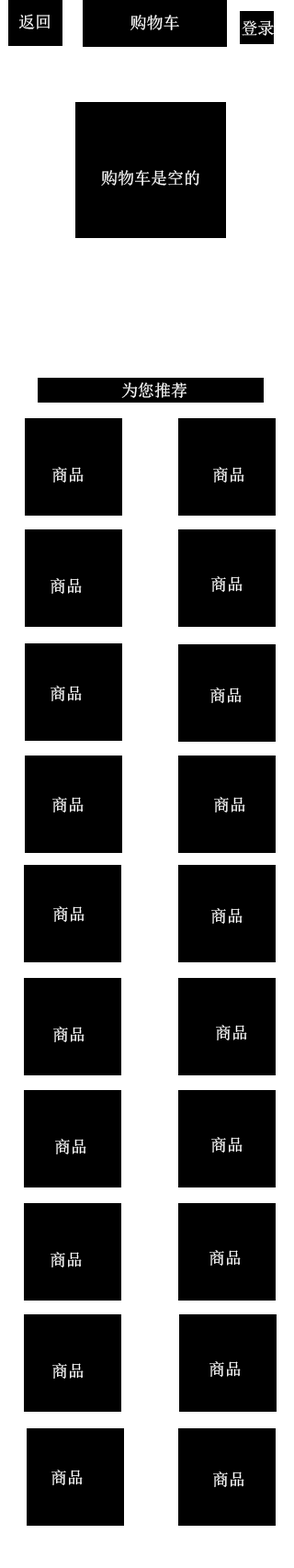
<style>
.page{position:relative;width:294px;height:1568px;background:#ffffff}
.page>*{position:absolute;margin:0}
.t1{font:16.5px "SimSun";color:#ffffff}
</style>
<div class="page">
<p class="t1" style="left:19px;top:14px;width:31px;height:15px">返回</p>
<p class="t1" style="left:131px;top:15px;width:48px;height:15px">购物车</p>
<p class="t1" style="left:242px;top:20px;width:32px;height:16px">登录</p>
<p class="t1" style="left:101px;top:170px;width:98px;height:16px">购物车是空的</p>
<p class="t1" style="left:121px;top:382px;width:66px;height:16px">为您推荐</p>
<p class="t1" style="left:52px;top:467px;width:32px;height:16px">商品</p>
<p class="t1" style="left:213px;top:467px;width:31px;height:16px">商品</p>
<p class="t1" style="left:51px;top:578px;width:31px;height:16px">商品</p>
<p class="t1" style="left:211px;top:576px;width:32px;height:16px">商品</p>
<p class="t1" style="left:51px;top:686px;width:31px;height:15px">商品</p>
<p class="t1" style="left:210px;top:687px;width:32px;height:16px">商品</p>
<p class="t1" style="left:52px;top:797px;width:32px;height:15px">商品</p>
<p class="t1" style="left:214px;top:797px;width:31px;height:15px">商品</p>
<p class="t1" style="left:53px;top:906px;width:32px;height:16px">商品</p>
<p class="t1" style="left:211px;top:908px;width:32px;height:16px">商品</p>
<p class="t1" style="left:216px;top:1025px;width:31px;height:15px">商品</p>
<p class="t1" style="left:53px;top:1027px;width:32px;height:15px">商品</p>
<p class="t1" style="left:55px;top:1139px;width:31px;height:15px">商品</p>
<p class="t1" style="left:211px;top:1137px;width:32px;height:16px">商品</p>
<p class="t1" style="left:51px;top:1252px;width:31px;height:15px">商品</p>
<p class="t1" style="left:210px;top:1250px;width:31px;height:16px">商品</p>
<p class="t1" style="left:210px;top:1361px;width:31px;height:16px">商品</p>
<p class="t1" style="left:52px;top:1363px;width:32px;height:16px">商品</p>
<p class="t1" style="left:51px;top:1470px;width:32px;height:15px">商品</p>
<p class="t1" style="left:213px;top:1471px;width:31px;height:16px">商品</p>
</div>
